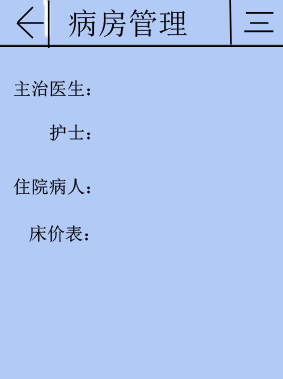
<style>
.page{position:relative;width:283px;height:379px;background:#b2caf6}
.page>*{position:absolute;margin:0}
.t1{font:30.1px "SimSun";color:#000000}
.t2{font:18px "SimSun";color:#020000}
</style>
<div class="page">
<p class="t1" style="left:69px;top:9px;width:118px;height:28px">病房管理</p>
<p class="t2" style="left:14px;top:80px;width:76px;height:17px">主治医生：</p>
<p class="t2" style="left:49px;top:124px;width:41px;height:17px">护士：</p>
<p class="t2" style="left:13px;top:178px;width:77px;height:17px">住院病人：</p>
<p class="t2" style="left:29px;top:225px;width:59px;height:17px">床价表：</p>
</div>
